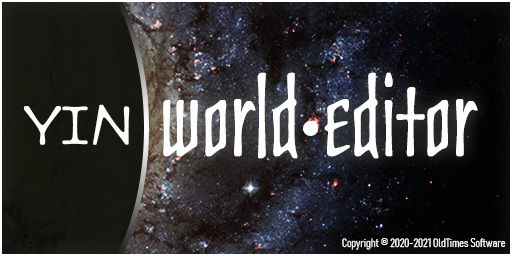
<style>
.page{position:relative;width:512px;height:256px}
.page>*{position:absolute;margin:0}
.t1{font:89.7px "CultStd";letter-spacing:-0.01em;color:#ffffff;font-weight:bold}
.t2{font:54.4px "CultStd";letter-spacing:-0.01em;color:#ffffff;font-weight:bold}
.t3{font:12px "Bahnschrift-LightCondensed";letter-spacing:-0.01em;color:#ffffff;font-weight:bold}
</style>
<div class="page">
<p class="t1" style="left:163px;top:72px;width:315px;height:87px">world editor</p>
<p class="t2" style="left:23px;top:104px;width:107px;height:41px">YIN</p>
<p class="t3" style="left:342px;top:238px;width:163px;height:12px">Copyright © 2020-2021 OldTimes Software</p>
</div>
